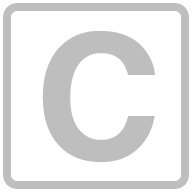
<style>
.page{position:relative;width:192px;height:192px;background:#ffffff}
.page>*{position:absolute;margin:0}
.t1{font:175px "Helvetica-Bold";color:#bebebe}
</style>
<div class="page">
<p class="t1" style="left:42px;top:31px;width:113px;height:131px">C</p>
</div>
